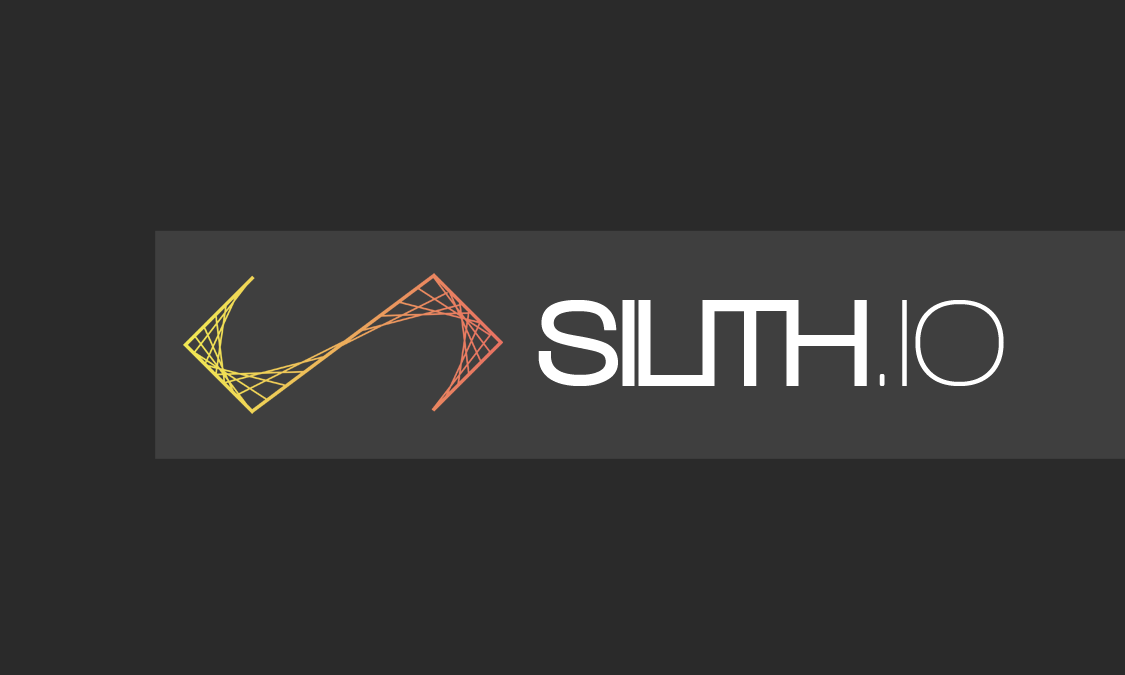
<style>
.page{position:relative;width:1125px;height:675px;background:#2a2a2a}
.page>*{position:absolute;margin:0}
.t1{font:125px "WalkwayBlack";color:#ffffff}
.t2{font:125px "WalkwaySemiBold";color:#ffffff}
</style>
<div class="page">
<p class="t1" style="left:538px;top:300px;width:466px;height:86px">SILITH<span class="t2">.IO</span></p>
</div>
